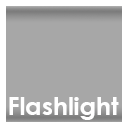
<style>
.page{position:relative;width:128px;height:128px;background:#a7a7a7}
.page>*{position:absolute;margin:0}
.t1{font:25px "CenturyGothic-Bold";color:#ffffff}
</style>
<div class="page">
<p class="t1" style="left:9px;top:97px;width:110px;height:23px">Flashlight</p>
</div>
